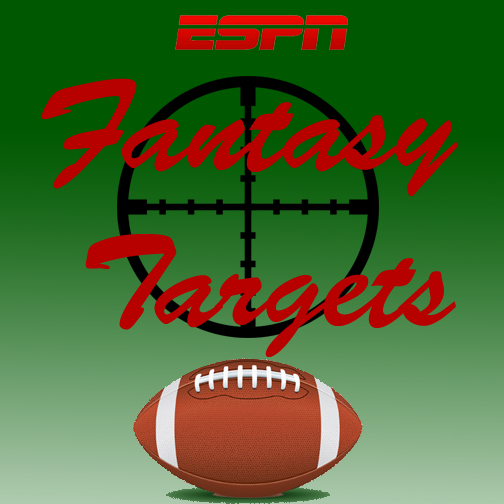
<style>
.page{position:relative;width:504px;height:504px;background:#005801}
.page>*{position:absolute;margin:0}
.t1{font:130px "BrushScriptStd";color:#b70000}
</style>
<div class="page">
<p class="t1" style="left:41px;top:78px;width:417px;height:279px;text-align:center">Fantasy<br> Targets</p>
</div>
